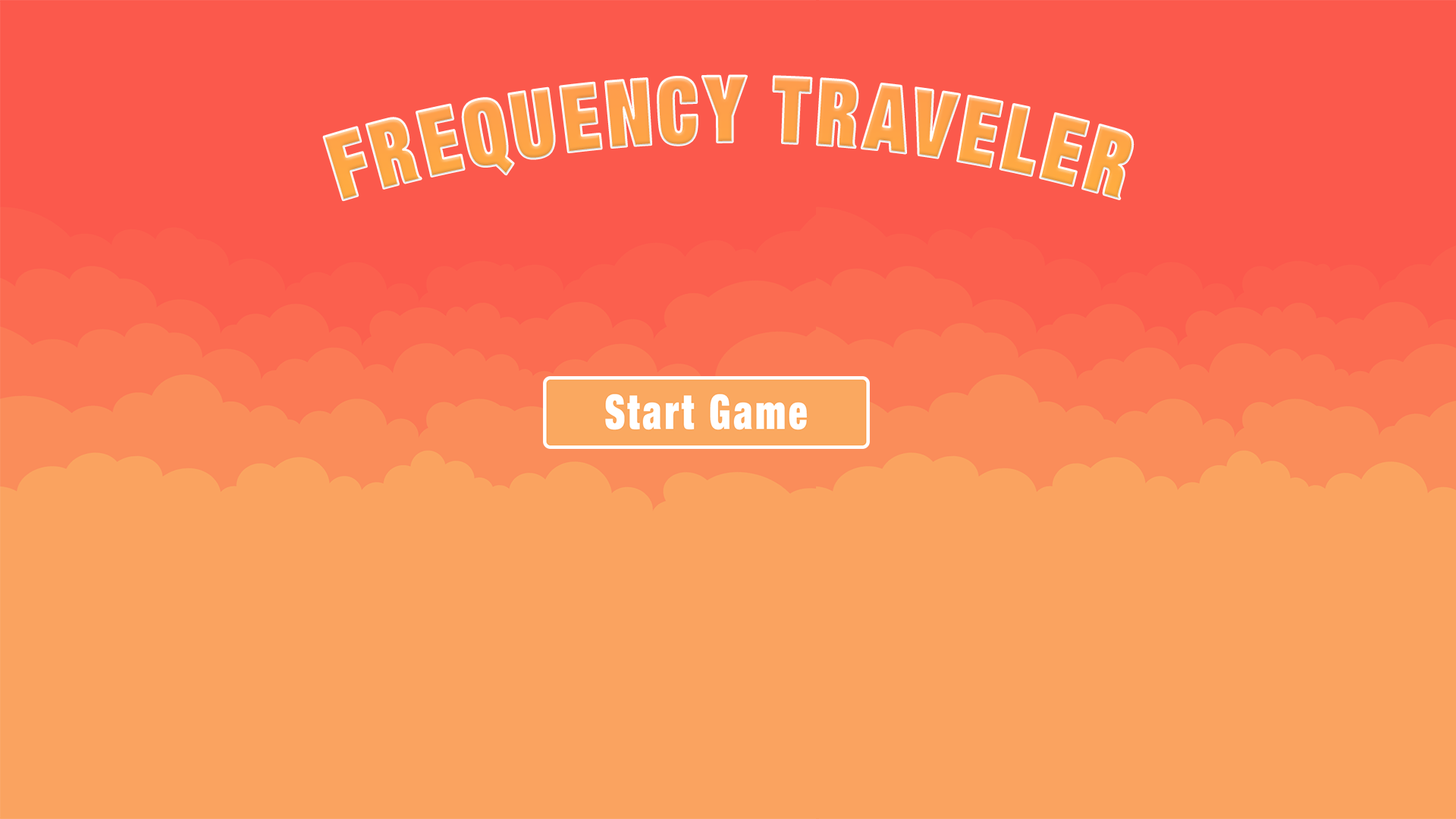
<style>
.page{position:relative;width:1456px;height:819px;background:#faa360}
.page>*{position:absolute;margin:0}
.t1{font:91.6px "HelveticaNeueLTCom-XBlkCn";letter-spacing:0.075em;color:#ffb24e;scale:0.8 1}
</style>
<div class="page">
<p class="t1" style="left:324px;top:76px;width:809px;height:124px">FREQUENCY TRAVELER</p>
</div>
